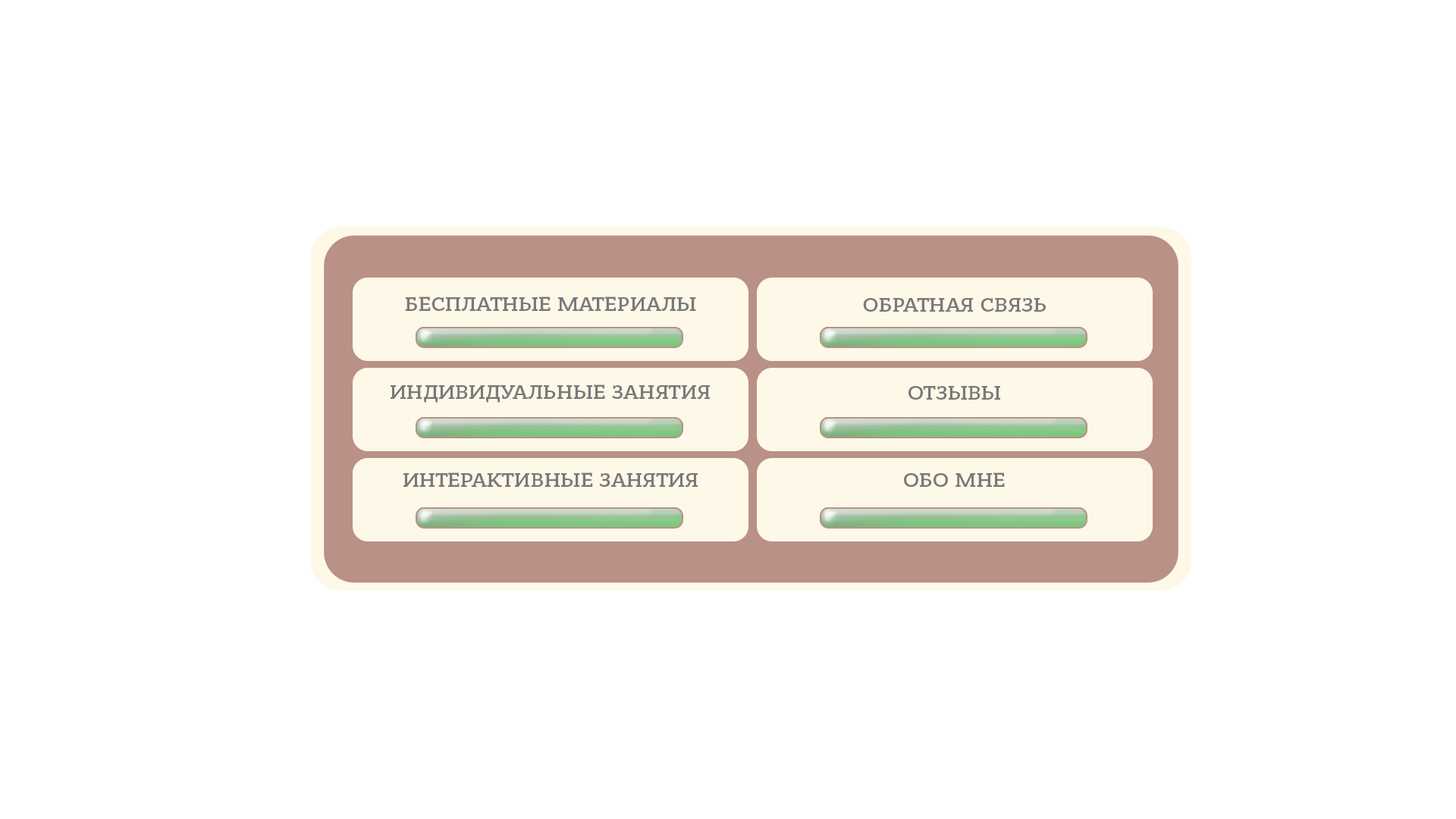
<style>
.page{position:relative;width:1456px;height:819px;background:#ffffff}
.page>*{position:absolute;margin:0}
.t1{font:21.1px "BanderaProMedium";color:#797979}
</style>
<div class="page">
<p class="t1" style="left:405px;top:297px;width:291px;height:14px">БЕСПЛАТНЫЕ МАТЕРИАЛЫ</p>
<p class="t1" style="left:863px;top:297px;width:183px;height:15px">ОБРАТНАЯ СВЯЗЬ</p>
<p class="t1" style="left:390px;top:384px;width:321px;height:19px">ИНДИВИДУАЛЬНЫЕ ЗАНЯТИЯ</p>
<p class="t1" style="left:908px;top:385px;width:93px;height:15px">ОТЗЫВЫ</p>
<p class="t1" style="left:403px;top:472px;width:295px;height:15px">ИНТЕРАКТИВНЫЕ ЗАНЯТИЯ</p>
<p class="t1" style="left:904px;top:472px;width:101px;height:15px">ОБО МНЕ</p>
</div>
